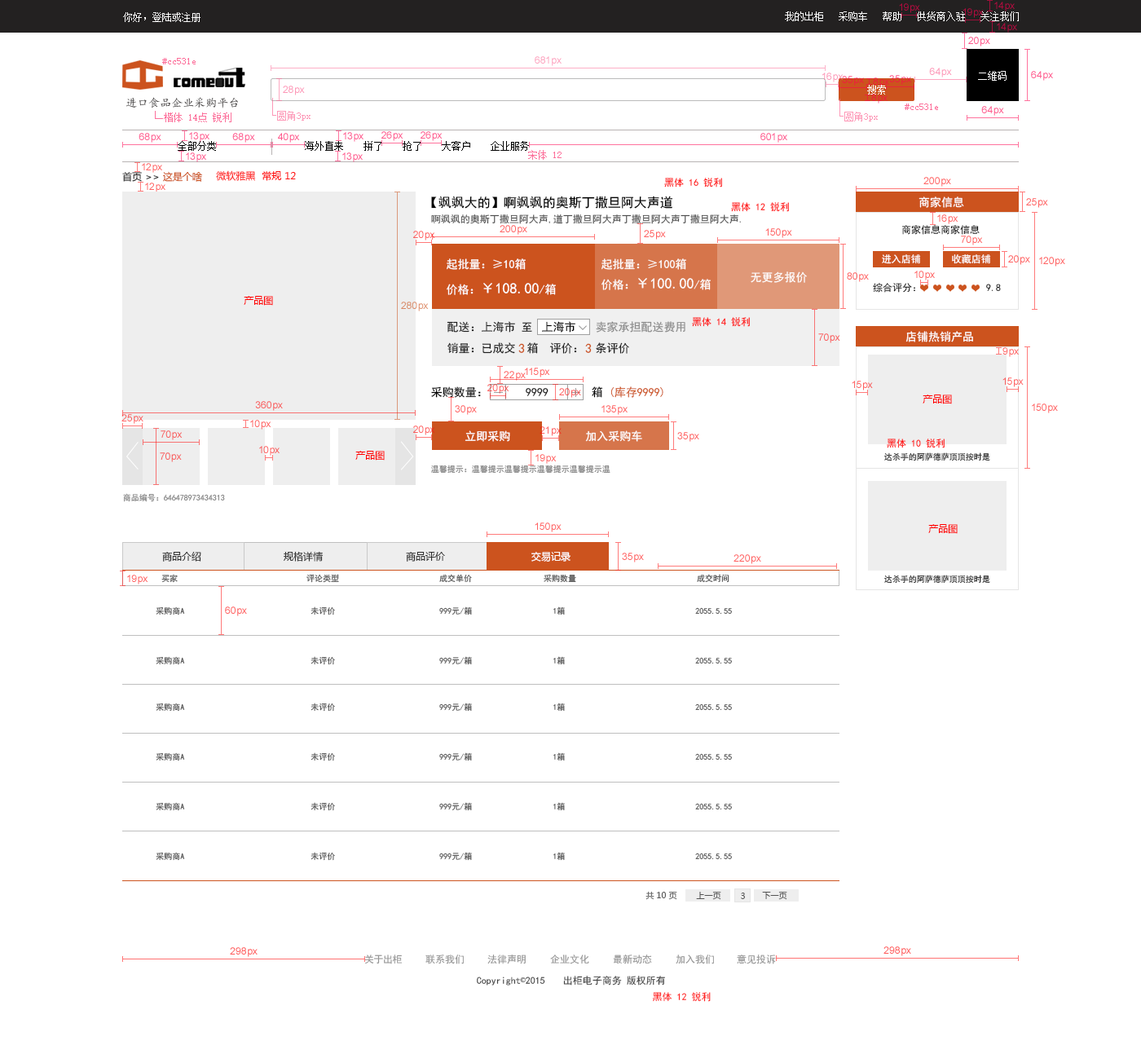
<style>
.page{position:relative;width:1141px;height:1045px;background:#ffffff}
.page>*{position:absolute;margin:0}
.t1{font:9.8px "SimSun";color:#ffffff}
.t2{font:9.8px "SimSun";color:#fc6f9a}
.t3{font:11.4px "¿¬Ìå";color:#464343}
.t4{font:9.8px "SimSun";color:#000000}
.t5{font:9.8px "MicrosoftYaHei";color:#cc531e}
.t6{font:9.8px "MicrosoftYaHei";color:#2a2a2a}
.t7{font:9.8px "MicrosoftYaHei";color:#333333}
.t8{font:9.8px "MicrosoftYaHei";color:#ff1111}
.t9{font:9.8px "SimHei";color:#ff0000}
.t10{font:13px "SimHei";color:#000000}
.t11{font:11.4px "SimHei";color:#ffffff}
.t12{font:9.8px "SimHei";color:#4f4f4f}
.t13{font:9.8px "SimHei";color:#101010}
.t14{font:9.8px "SimHei";color:#ffffff}
.t15{font:14.7px "SimHei";color:#ffffff}
.t16{font:9.8px "MicrosoftYaHei";color:#ff0000}
.t17{font:11.4px "SimHei";color:#1e1e1e}
.t18{font:11.4px "SimHei";color:#000000}
.t19{font:11.4px "SimHei";color:#8b8b8b}
.t20{font:13px "SimHei";color:#cc531e}
.t21{font:11.4px "SimHei";color:#161616}
.t22{font:11.4px "SimHei";color:#cc531e}
.t23{font:8.2px "SimHei";color:#282828}
.t24{font:8.2px "SimHei";color:#858585}
.t25{font:9.8px "MicrosoftYaHei";color:#2f2f2f}
.t26{font:9.8px "MicrosoftYaHei";color:#3a3a3a}
.t27{font:9.8px "MicrosoftYaHei";color:#ffffff}
.t28{font:8.2px "SimHei";color:#525252}
.t29{font:8.2px "SimHei"}
.t30{font:8.2px "MicrosoftYaHei";color:#545454}
.t31{font:9.8px "SimHei";color:#959595}
.t32{font:9.8px "SimHei";color:#434343}
.t33{font:9.8px "SimSun";color:#434343}
.t34{font:9.8px "SimHei";color:#ff2222}
</style>
<div class="page">
<p class="t1" style="left:123px;top:12px;width:78px;height:10px">你好，登陆或注册</p>
<p class="t1" style="left:785px;top:11px;width:234px;height:10px">我的出柜   采购车   帮助   供货商入驻   关注我们</p>
<p class="t2" style="left:162px;top:58px;width:34px;height:6px">#cc531e</p>
<p class="t1" style="left:978px;top:71px;width:29px;height:10px">二维码</p>
<p class="t1" style="left:867px;top:85px;width:19px;height:10px">搜索</p>
<p class="t3" style="left:126px;top:97px;width:112px;height:11px">进口食品企业采购平台</p>
<p class="t2" style="left:905px;top:104px;width:33px;height:6px">#cc531e</p>
<p class="t4" style="left:178px;top:141px;width:38px;height:10px">全部分类</p>
<p class="t4" style="left:305px;top:141px;width:224px;height:10px">海外直来    拼了    抢了    大客户    企业服务</p>
<p class="t2" style="left:528px;top:150px;width:34px;height:10px">宋体 12</p>
<p class="t5" style="left:122px;top:171px;width:80px;height:11px"><span class="t6">首页 </span><span class="t7">&gt;&gt; </span>这是个啥</p>
<p class="t8" style="left:216px;top:170px;width:80px;height:11px">微软雅黑  常规 12</p>
<p class="t9" style="left:664px;top:178px;width:58px;height:9px">黑体 16 锐利</p>
<p class="t10" style="left:431px;top:196px;width:242px;height:13px">【飒飒大的】啊飒飒的奥斯丁撒旦阿大声道</p>
<p class="t11" style="left:919px;top:196px;width:45px;height:12px">商家信息</p>
<p class="t9" style="left:731px;top:202px;width:58px;height:10px">黑体 12 锐利</p>
<p class="t12" style="left:431px;top:214px;width:310px;height:10px">啊飒飒的奥斯丁撒旦阿大声,道丁撒旦阿大声丁撒旦阿大声丁撒旦阿大声.</p>
<p class="t13" style="left:901px;top:225px;width:79px;height:10px">商家信息商家信息</p>
<p class="t14" style="left:882px;top:254px;width:39px;height:10px">进入店铺</p>
<p class="t14" style="left:952px;top:254px;width:39px;height:10px">收藏店铺</p>
<p class="t11" style="left:447px;top:258px;width:79px;height:12px">起批量：≥10箱</p>
<p class="t11" style="left:602px;top:258px;width:84px;height:12px">起批量：≥100箱</p>
<p class="t15" style="left:602px;top:278px;width:109px;height:12px"><span class="t11">价格：</span>￥100.00<span class="t11">/箱</span></p>
<p class="t11" style="left:751px;top:271px;width:56px;height:12px">无更多报价</p>
<p class="t15" style="left:447px;top:283px;width:109px;height:12px"><span class="t11">价格：</span>￥108.00<span class="t11">/箱</span></p>
<p class="t13" style="left:873px;top:283px;width:42px;height:10px">综合评分：</p>
<p class="t13" style="left:986px;top:284px;width:15px;height:7px">9.8</p>
<p class="t16" style="left:244px;top:296px;width:29px;height:10px">产品图</p>
<p class="t9" style="left:692px;top:317px;width:58px;height:10px">黑体 14 锐利</p>
<p class="t17" style="left:447px;top:321px;width:85px;height:12px">配送：上海市 至</p>
<p class="t18" style="left:542px;top:321px;width:33px;height:12px">上海市</p>
<p class="t19" style="left:596px;top:321px;width:89px;height:12px">卖家承担配送费用</p>
<p class="t11" style="left:906px;top:331px;width:67px;height:11px">店铺热销产品</p>
<p class="t17" style="left:447px;top:342px;width:91px;height:12px">销量：已成交  箱</p>
<p class="t20" style="left:518px;top:343px;width:7px;height:10px">3</p>
<p class="t17" style="left:549px;top:342px;width:80px;height:12px">评价：  条评价</p>
<p class="t20" style="left:585px;top:343px;width:7px;height:10px">3</p>
<p class="t18" style="left:431px;top:386px;width:50px;height:12px">采购数量：</p>
<p class="t21" style="left:526px;top:388px;width:23px;height:8px">9999</p>
<p class="t18" style="left:592px;top:386px;width:11px;height:12px">箱</p>
<p class="t22" style="left:611px;top:386px;width:52px;height:12px">(库存9999)</p>
<p class="t16" style="left:923px;top:395px;width:29px;height:9px">产品图</p>
<p class="t11" style="left:465px;top:430px;width:45px;height:12px">立即采购</p>
<p class="t11" style="left:585px;top:430px;width:57px;height:12px">加入采购车</p>
<p class="t9" style="left:887px;top:439px;width:58px;height:9px">黑体 10 锐利</p>
<p class="t16" style="left:355px;top:451px;width:30px;height:10px">产品图</p>
<p class="t23" style="left:884px;top:452px;width:106px;height:9px">达杀手的阿萨德萨顶顶按时是</p>
<p class="t24" style="left:431px;top:465px;width:180px;height:9px">温馨提示：温馨提示温馨提示温馨提示温馨提示温</p>
<p class="t24" style="left:123px;top:493px;width:102px;height:9px">商品编号：646478973434313</p>
<p class="t16" style="left:928px;top:524px;width:30px;height:10px">产品图</p>
<p class="t25" style="left:162px;top:551px;width:39px;height:11px">商品介绍</p>
<p class="t26" style="left:284px;top:551px;width:40px;height:11px">规格详情</p>
<p class="t25" style="left:406px;top:552px;width:39px;height:10px">商品评价</p>
<p class="t27" style="left:531px;top:552px;width:40px;height:10px">交易记录</p>
<p class="t28" style="left:161px;top:574px;width:17px;height:9px">买家</p>
<p class="t28" style="left:306px;top:574px;width:33px;height:9px">评论类型</p>
<p class="t28" style="left:439px;top:574px;width:33px;height:9px">成交单价</p>
<p class="t29" style="left:544px;top:574px;width:32px;height:9px">采购数量</p>
<p class="t28" style="left:697px;top:574px;width:33px;height:9px">成交时间</p>
<p class="t23" style="left:884px;top:575px;width:106px;height:9px">达杀手的阿萨德萨顶顶按时是</p>
<p class="t28" style="left:156px;top:606px;width:29px;height:9px">采购商A</p>
<p class="t28" style="left:311px;top:606px;width:24px;height:9px">未评价</p>
<p class="t28" style="left:439px;top:606px;width:33px;height:9px">999元/箱</p>
<p class="t28" style="left:553px;top:606px;width:12px;height:9px">1箱</p>
<p class="t28" style="left:695px;top:607px;width:37px;height:8px">2055.5.55</p>
<p class="t28" style="left:156px;top:656px;width:29px;height:9px">采购商A</p>
<p class="t28" style="left:311px;top:656px;width:24px;height:9px">未评价</p>
<p class="t28" style="left:439px;top:656px;width:33px;height:9px">999元/箱</p>
<p class="t28" style="left:553px;top:656px;width:12px;height:9px">1箱</p>
<p class="t28" style="left:695px;top:657px;width:37px;height:7px">2055.5.55</p>
<p class="t28" style="left:156px;top:703px;width:29px;height:9px">采购商A</p>
<p class="t28" style="left:311px;top:703px;width:24px;height:9px">未评价</p>
<p class="t28" style="left:439px;top:703px;width:33px;height:9px">999元/箱</p>
<p class="t28" style="left:553px;top:703px;width:12px;height:9px">1箱</p>
<p class="t28" style="left:695px;top:703px;width:37px;height:8px">2055.5.55</p>
<p class="t28" style="left:156px;top:752px;width:29px;height:9px">采购商A</p>
<p class="t28" style="left:311px;top:752px;width:24px;height:9px">未评价</p>
<p class="t28" style="left:439px;top:752px;width:33px;height:9px">999元/箱</p>
<p class="t28" style="left:553px;top:752px;width:12px;height:9px">1箱</p>
<p class="t28" style="left:695px;top:753px;width:37px;height:7px">2055.5.55</p>
<p class="t28" style="left:156px;top:802px;width:29px;height:9px">采购商A</p>
<p class="t28" style="left:311px;top:802px;width:24px;height:9px">未评价</p>
<p class="t28" style="left:439px;top:802px;width:33px;height:9px">999元/箱</p>
<p class="t28" style="left:553px;top:802px;width:12px;height:9px">1箱</p>
<p class="t28" style="left:695px;top:803px;width:37px;height:7px">2055.5.55</p>
<p class="t28" style="left:156px;top:852px;width:29px;height:9px">采购商A</p>
<p class="t28" style="left:311px;top:852px;width:24px;height:9px">未评价</p>
<p class="t28" style="left:439px;top:852px;width:33px;height:9px">999元/箱</p>
<p class="t28" style="left:553px;top:852px;width:12px;height:9px">1箱</p>
<p class="t28" style="left:695px;top:853px;width:37px;height:7px">2055.5.55</p>
<p class="t30" style="left:646px;top:891px;width:31px;height:9px">共 10 页</p>
<p class="t30" style="left:696px;top:892px;width:25px;height:8px">上一页</p>
<p class="t30" style="left:741px;top:893px;width:4px;height:6px">3</p>
<p class="t30" style="left:762px;top:892px;width:25px;height:8px">下一页</p>
<p class="t31" style="left:364px;top:954px;width:39px;height:10px">关于出柜</p>
<p class="t31" style="left:425px;top:954px;width:39px;height:10px">联系我们</p>
<p class="t31" style="left:487px;top:954px;width:39px;height:10px">法律声明</p>
<p class="t31" style="left:550px;top:954px;width:39px;height:10px">企业文化</p>
<p class="t31" style="left:613px;top:954px;width:39px;height:10px">最新动态</p>
<p class="t31" style="left:676px;top:954px;width:38px;height:10px">加入我们</p>
<p class="t31" style="left:737px;top:954px;width:39px;height:10px">意见投诉</p>
<p class="t32" style="left:477px;top:976px;width:68px;height:9px">Copyright<span class="t33">©</span>2015</p>
<p class="t32" style="left:563px;top:976px;width:59px;height:9px">出柜电子商务</p>
<p class="t32" style="left:627px;top:976px;width:38px;height:9px">版权所有</p>
<p class="t34" style="left:652px;top:992px;width:59px;height:10px">黑体 12 锐利</p>
</div>
